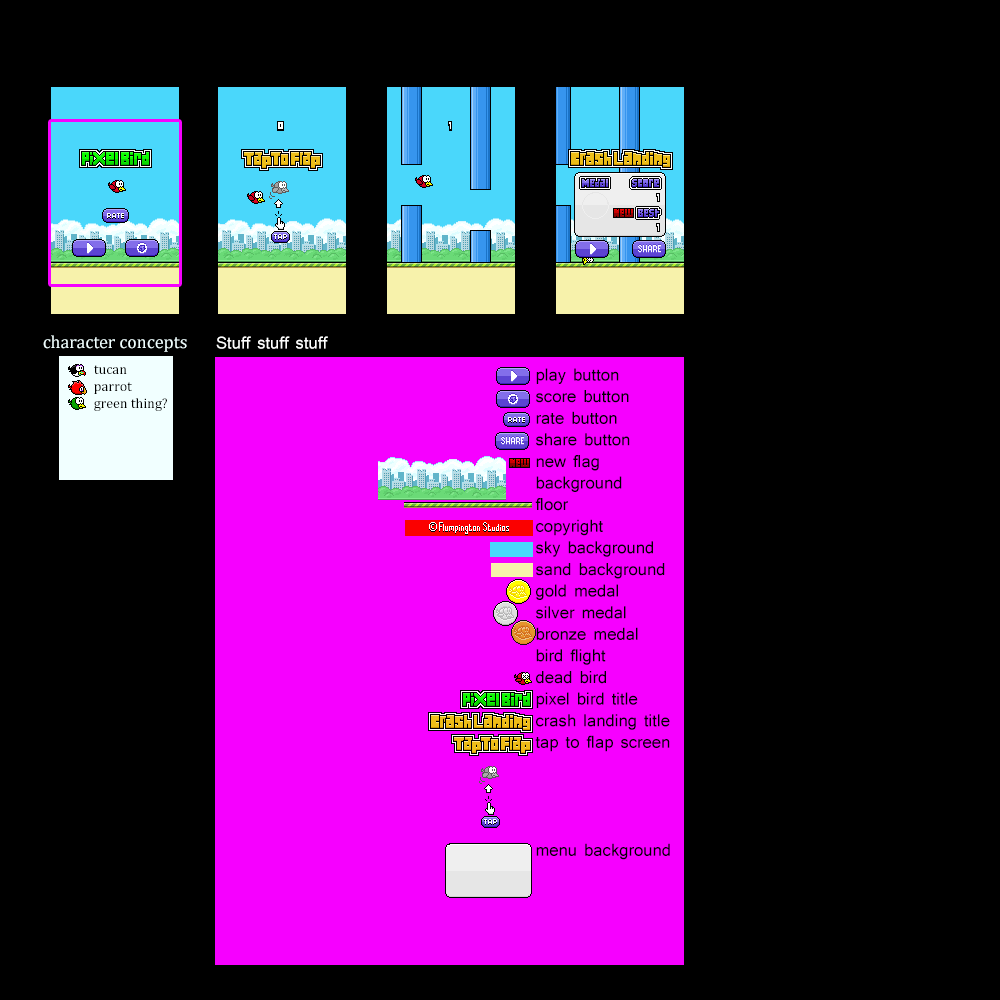
<style>
.page{position:relative;width:1000px;height:1000px;background:#000000}
.page>*{position:absolute;margin:0}
.t1{font:18px "Cambria";color:#f1ffff}
.t2{font:18px "Shruti";color:#ffffff}
.t3{font:14px "Cambria";color:#000000}
.t4{font:18px "Shruti";color:#000000}
</style>
<div class="page">
<p class="t1" style="left:43px;top:335px;width:144px;height:17px">character concepts</p>
<p class="t2" style="left:216px;top:336px;width:112px;height:13px">Stuff stuff stuff</p>
<p class="t3" style="left:94px;top:365px;width:73px;height:46px;text-align:right">tucan<br>parrot<br>?green thing</p>
<p class="t4" style="left:535px;top:368px;width:135px;height:492px;text-align:right">play button<br>score button<br>rate button<br>share button<br>new flag<br>background<br>floor<br>copyright<br>sky background<br>sand background<br>gold medal<br>silver medal<br>bronze medal<br>bird flight<br>dead bird<br>pixel bird title<br>crash landing title<br>tap to flap screen<br><br><br><br><br>menu background</p>
</div>
